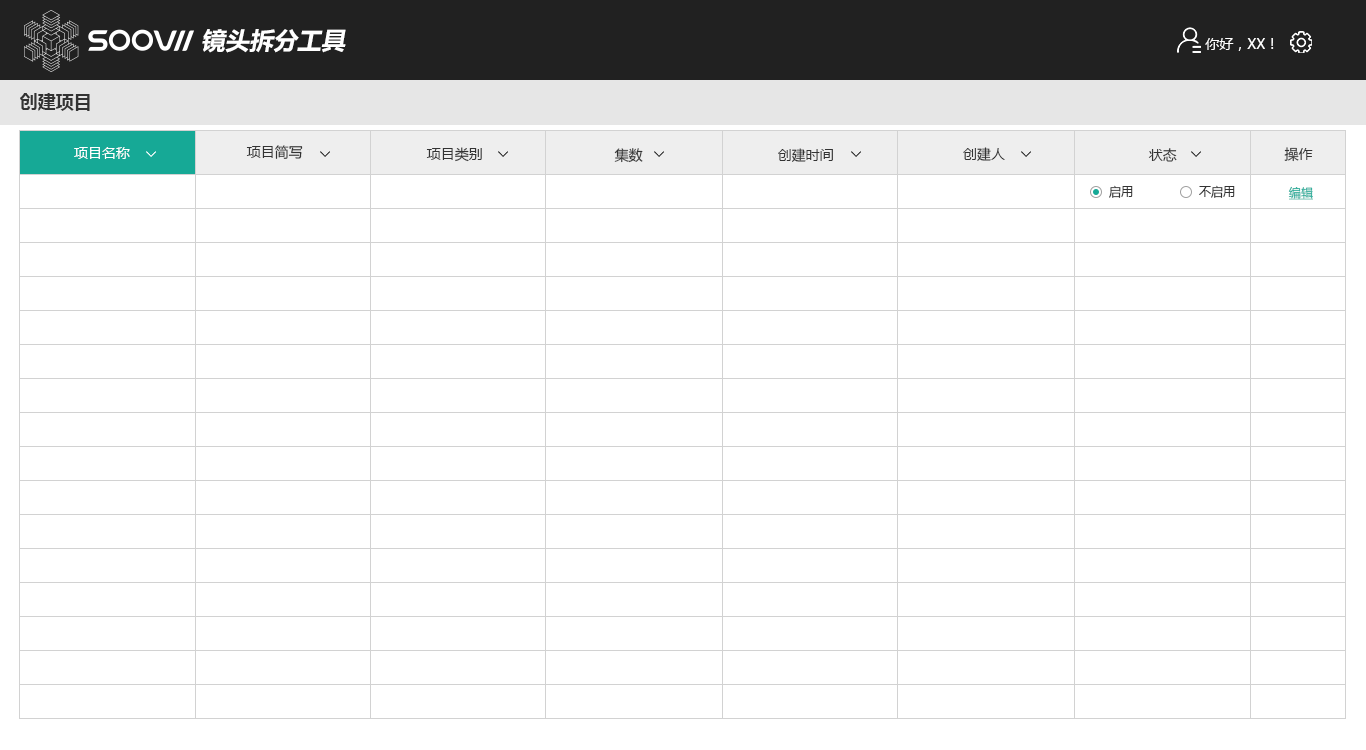
<style>
.page{position:relative;width:1366px;height:750px;background:#ffffff}
.page>*{position:absolute;margin:0}
.t1{font:24px "MicrosoftYaHei-Bold";color:#ffffff;font-style:italic}
.t2{font:14px "MicrosoftYaHei";color:#ffffff}
.t3{font:18px "MicrosoftYaHei-Bold";color:#333333}
.t4{font:14px "MicrosoftYaHei";color:#333333}
.t5{font:12px "MicrosoftYaHei";color:#333333}
.t6{font:12px "MicrosoftYaHei";text-decoration:underline}
</style>
<div class="page">
<p class="t1" style="left:202px;top:29px;width:144px;height:24px">镜头拆分工具</p>
<p class="t2" style="left:1205px;top:38px;width:69px;height:13px">你好，XX！</p>
<p class="t3" style="left:20px;top:93px;width:70px;height:18px">创建项目</p>
<p class="t2" style="left:74px;top:147px;width:56px;height:12px">项目名称</p>
<p class="t4" style="left:246px;top:145px;width:57px;height:14px">项目简写</p>
<p class="t4" style="left:426px;top:147px;width:56px;height:15px">项目类别</p>
<p class="t4" style="left:614px;top:148px;width:29px;height:15px">集数</p>
<p class="t4" style="left:778px;top:148px;width:55px;height:14px">创建时间</p>
<p class="t4" style="left:963px;top:147px;width:42px;height:14px">创建人</p>
<p class="t4" style="left:1148px;top:148px;width:29px;height:14px">状态</p>
<p class="t4" style="left:1284px;top:147px;width:29px;height:15px">操作</p>
<p class="t5" style="left:1109px;top:185px;width:24px;height:13px">启用</p>
<p class="t5" style="left:1199px;top:185px;width:36px;height:13px">不启用</p>
<p class="t6" style="left:1288px;top:186px;width:25px;height:14px">编辑</p>
</div>
